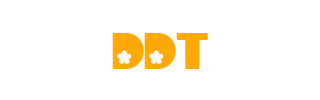
<style>
.page{position:relative;width:320px;height:100px;background:#ffffff}
.page>*{position:absolute;margin:0}
.t1{font:72px "Chick";color:#ffa904}
</style>
<div class="page">
<p class="t1" style="left:112px;top:33px;width:96px;height:36px">DDT</p>
</div>
